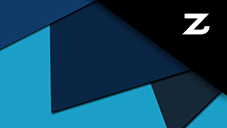
<style>
.page{position:relative;width:227px;height:128px;background:#1b9fc6}
.page>*{position:absolute;margin:0}
.t1{font:29.2px "Xirod-Regular";color:#ffffff;text-transform:uppercase}
</style>
<div class="page">
<p class="t1" style="left:182px;top:13px;width:28px;height:22px">z</p>
</div>
